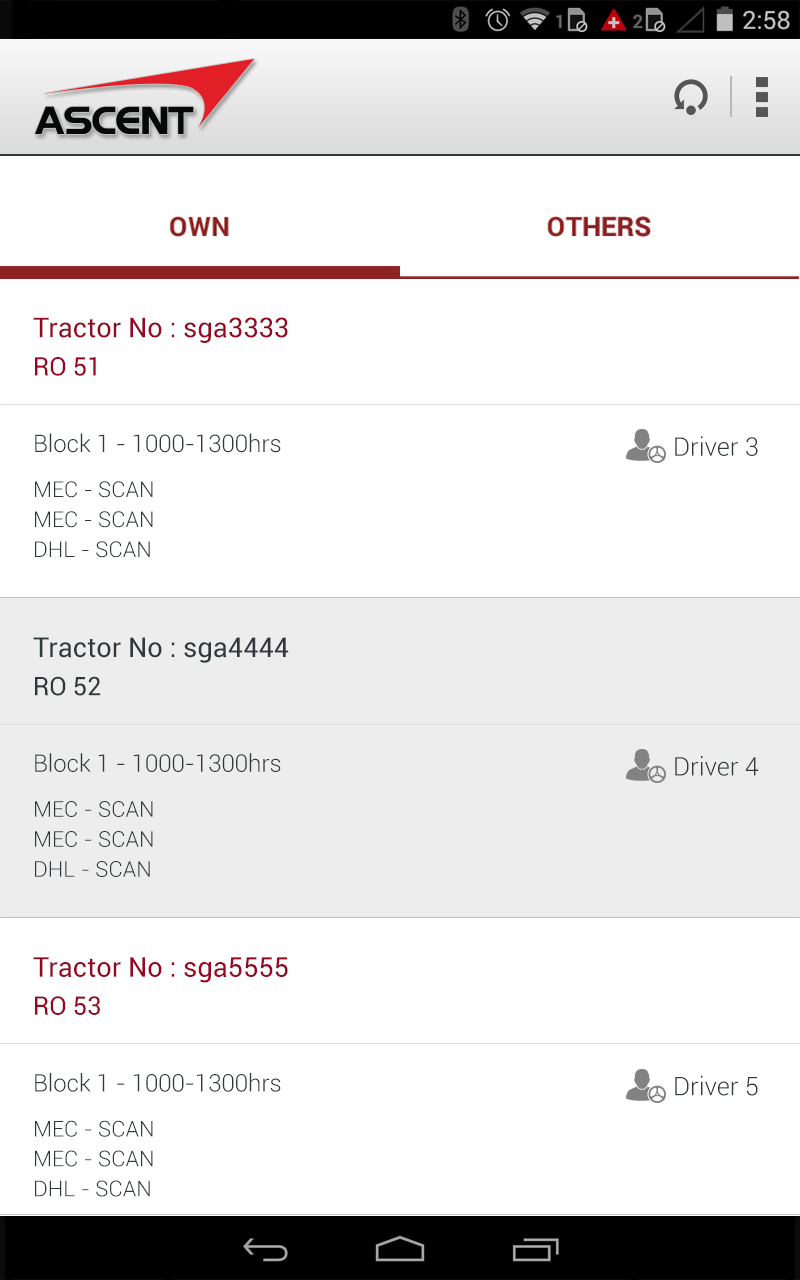
<style>
.page{position:relative;width:800px;height:1280px;background:#ffffff}
.page>*{position:absolute;margin:0}
.t1{font:27.2px "Roboto-Regular";color:#960721}
.t2{font:25.4px "Roboto-Regular";color:#960721}
.t3{font:24px "Roboto-Light";color:#30383a}
.t4{font:25.4px "Roboto-Light";color:#30383a}
.t5{font:22px/30px "Roboto-Light";color:#30383a}
.t6{font:27.2px "Roboto-Regular";color:#30383a}
.t7{font:25.4px "Roboto-Regular";color:#30383a}
</style>
<div class="page">
<p class="t1" style="left:33px;top:317px;width:255px;height:26px">Tractor No : sga3333</p>
<p class="t2" style="left:35px;top:357px;width:61px;height:19px">RO 51</p>
<p class="t3" style="left:35px;top:433px;width:246px;height:20px">Block 1 - 1000-1300hrs</p>
<p class="t4" style="left:675px;top:436px;width:83px;height:20px">Driver 3</p>
<p class="t5" style="left:35px;top:481px;width:118px;height:77px">MEC - SCAN<br>MEC - SCAN<br>DHL - SCAN</p>
<p class="t6" style="left:33px;top:637px;width:256px;height:26px">Tractor No : sga4444</p>
<p class="t7" style="left:35px;top:676px;width:66px;height:20px">RO 52</p>
<p class="t3" style="left:35px;top:753px;width:246px;height:19px">Block 1 - 1000-1300hrs</p>
<p class="t4" style="left:675px;top:756px;width:84px;height:20px">Driver 4</p>
<p class="t5" style="left:35px;top:801px;width:118px;height:76px">MEC - SCAN<br>MEC - SCAN<br>DHL - SCAN</p>
<p class="t1" style="left:33px;top:957px;width:255px;height:26px">Tractor No : sga5555</p>
<p class="t2" style="left:35px;top:996px;width:65px;height:19px">RO 53</p>
<p class="t3" style="left:35px;top:1073px;width:246px;height:19px">Block 1 - 1000-1300hrs</p>
<p class="t4" style="left:675px;top:1075px;width:83px;height:21px">Driver 5</p>
<p class="t5" style="left:35px;top:1120px;width:118px;height:77px">MEC - SCAN<br>MEC - SCAN<br>DHL - SCAN</p>
</div>
